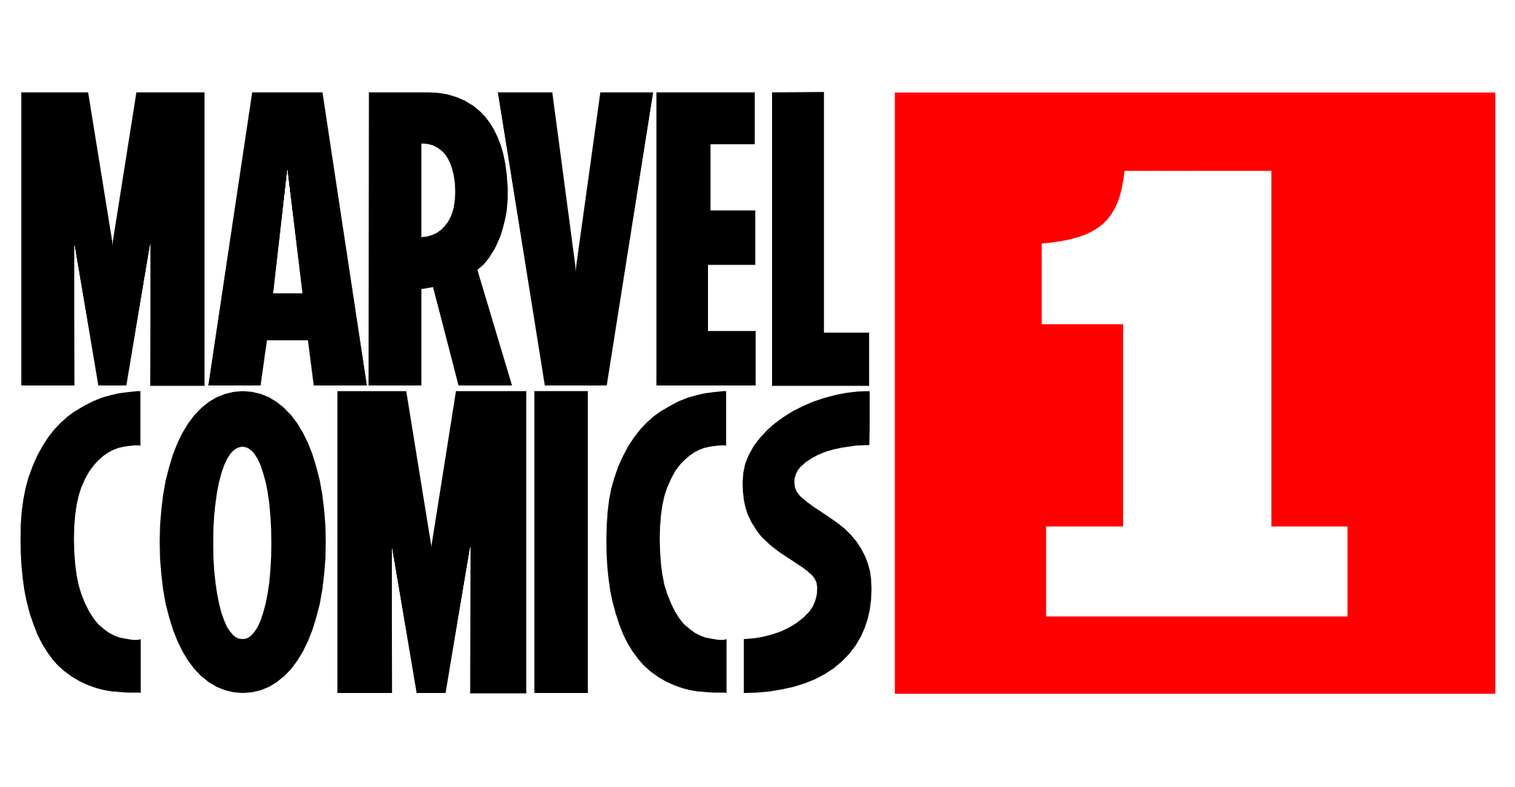
<style>
.page{position:relative;width:1515px;height:787px;background:#ffffff}
.page>*{position:absolute;margin:0}
.t1{font:418.6px "Marvel-Regular";color:#000000}
.t2{font:719.7px "Acknowledgement";color:#ffffff}
.t3{font:431.2px "Marvel-Regular";color:#000000}
</style>
<div class="page">
<p class="t1" style="left:21px;top:92px;width:849px;height:294px">MARVEL</p>
<p class="t2" style="left:1042px;top:170px;width:306px;height:446px">1</p>
<p class="t3" style="left:20px;top:391px;width:852px;height:303px">COMICS</p>
</div>
